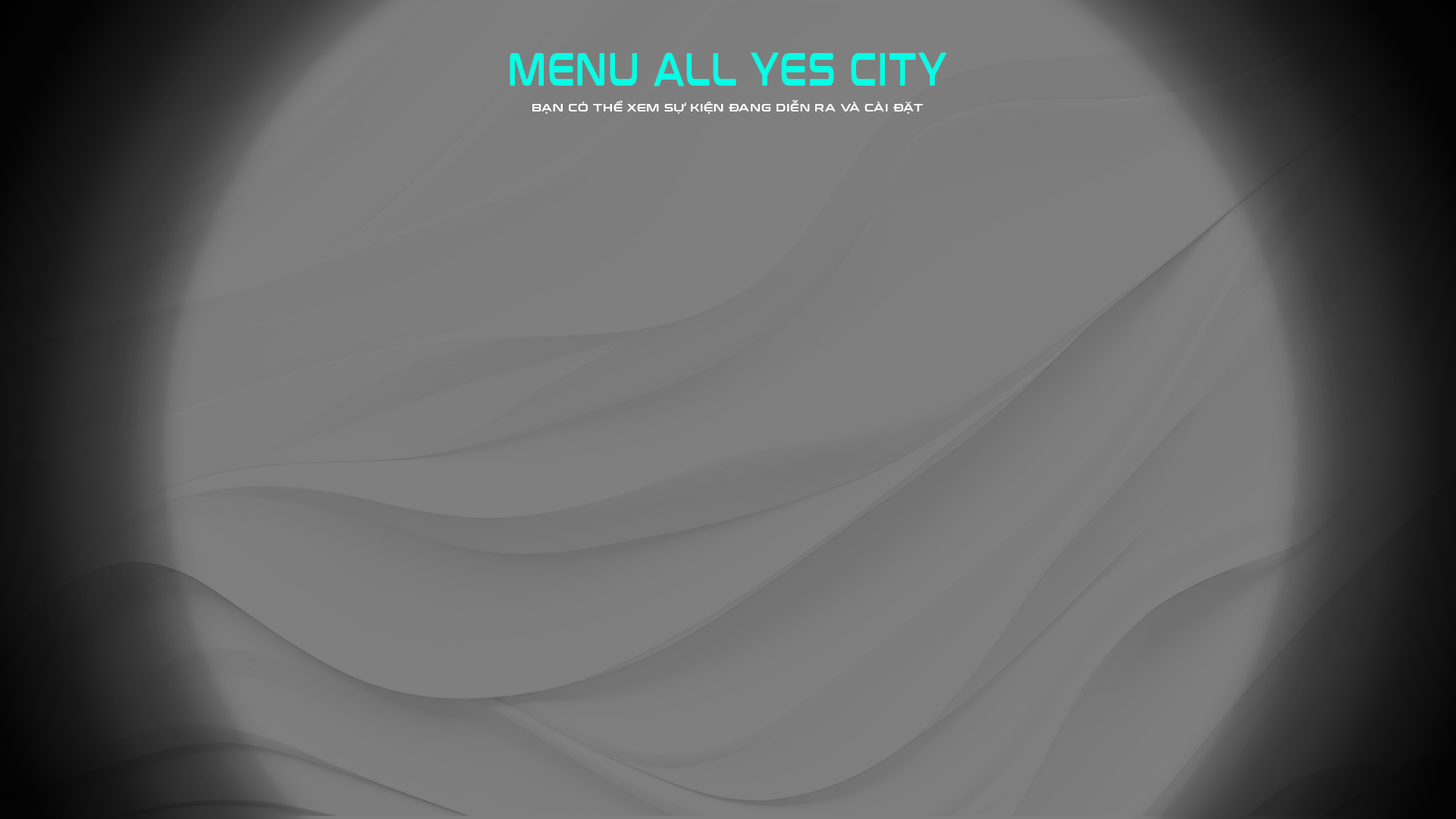
<style>
.page{position:relative;width:1456px;height:819px}
.page>*{position:absolute;margin:0}
.t1{font:47.1px "Conthrax-SemiBold";letter-spacing:0.06em;color:#05ffe5;scale:0.67 1}
.t2{font:10.6px "Conthrax-SemiBold";letter-spacing:0.06em;color:#ffffff}
</style>
<div class="page">
<p class="t1" style="left:510px;top:52px;width:436px;height:34px">MENU ALL YES CITY</p>
<p class="t2" style="left:532px;top:99px;width:391px;height:15px">BẠN CÓ THỂ XEM SỰ KIỆN ĐANG DIỄN RA VÀ CÀI ĐẶT</p>
</div>
